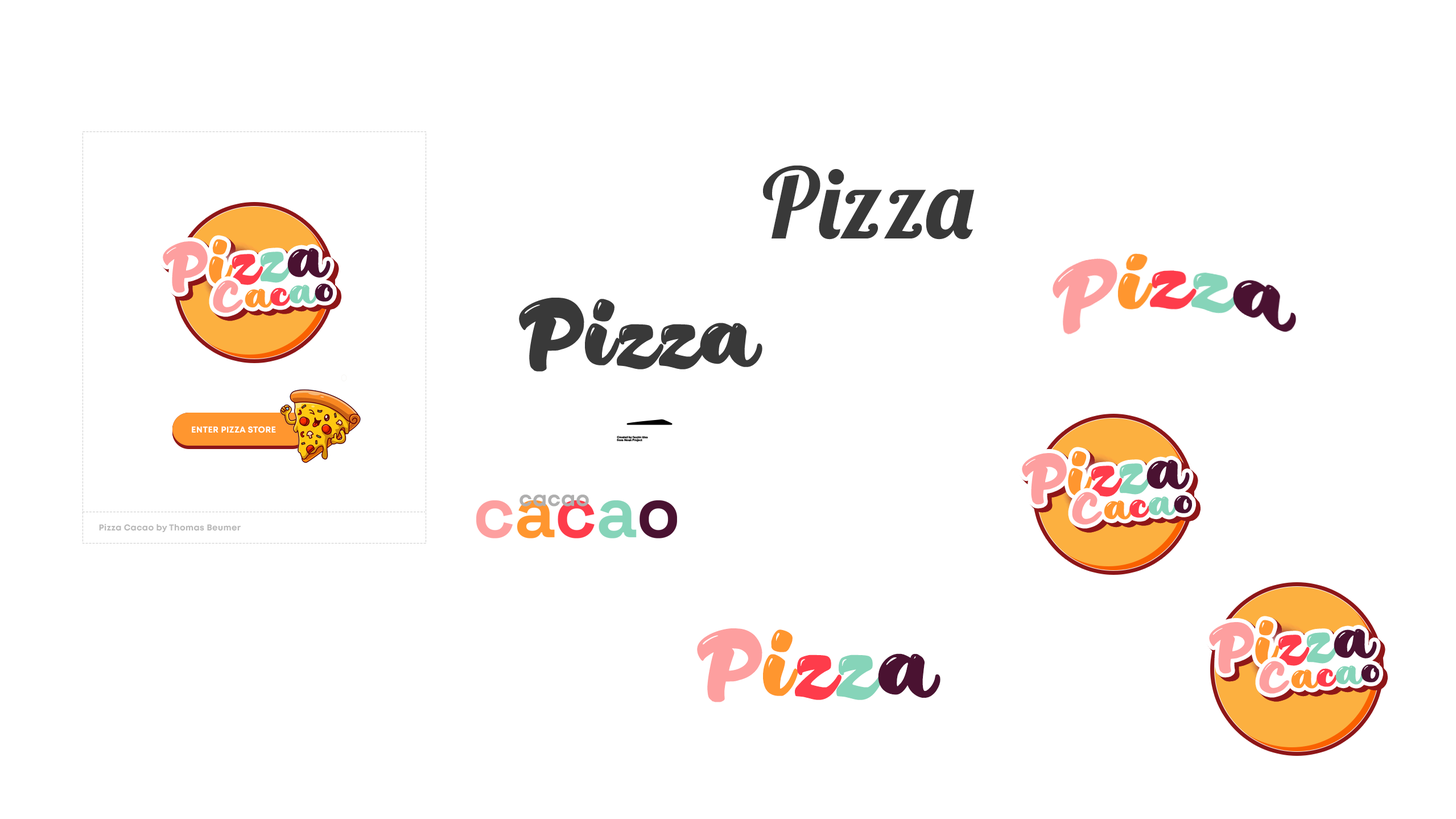
<style>
.page{position:relative;width:1456px;height:819px;background:#ffffff}
.page>*{position:absolute;margin:0}
.t1{font:97.3px "Lobster-Regular";letter-spacing:0.02em;color:#393939}
.t2{font:8.5px "Mont-Bold";letter-spacing:0.02em;color:#ffffff}
.t3{font:20.6px "Mont-Bold";letter-spacing:0.02em;color:#afafaf}
.t4{font:8.5px "Mont-Bold";letter-spacing:0.02em;color:#b8b8b8}
.t5{font:97.3px "MagicBubble";letter-spacing:0.02em;color:#fd9f9f}
.t6{font:97.3px "MagicBubble";letter-spacing:0.02em;color:#ff962f}
.t7{font:97.3px "MagicBubble";letter-spacing:0.02em;color:#fe3c4b}
.t8{font:97.3px "MagicBubble";letter-spacing:0.02em;color:#86d4b9}
.t9{font:97.3px "MagicBubble";letter-spacing:0.02em;color:#4a1231}
</style>
<div class="page">
<p class="t1" style="left:763px;top:165px;width:212px;height:75px">Pizza</p>
<p class="t2" style="left:192px;top:426px;width:84px;height:7px">ENTER PIZZA STORE</p>
<p class="t3" style="left:520px;top:495px;width:69px;height:11px">cacao</p>
<p class="t4" style="left:99px;top:524px;width:142px;height:8px">Pizza Cacao by Thomas Beumer</p>
<p class="t5" style="left:697px;top:628px;width:244px;height:74px">P<span class="t6">i</span><span class="t7">z</span><span class="t8">z</span><span class="t9">a</span></p>
</div>
